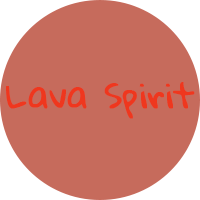
<style>
.page{position:relative;width:200px;height:200px;background:#c66b5c}
.page>*{position:absolute;margin:0}
.t1{font:33.3px "GloriaHallelujah";color:#ef371e;font-weight:bold}
</style>
<div class="page">
<p class="t1" style="left:6px;top:82px;width:189px;height:37px">Lava Spirit</p>
</div>
